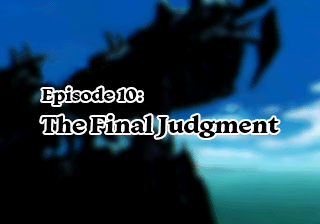
<style>
.page{position:relative;width:320px;height:224px;background:#000000}
.page>*{position:absolute;margin:0}
.t1{font:24px/32px "Monarcha-Bold";color:#000000}
.t2{font:18px/30px "Monarcha-Bold";color:#000000}
</style>
<div class="page">
<p class="t1" style="left:41px;top:87px;width:238px;height:51px"><span class="t2">Episode 10:<br></span>The Final Judgment</p>
</div>
